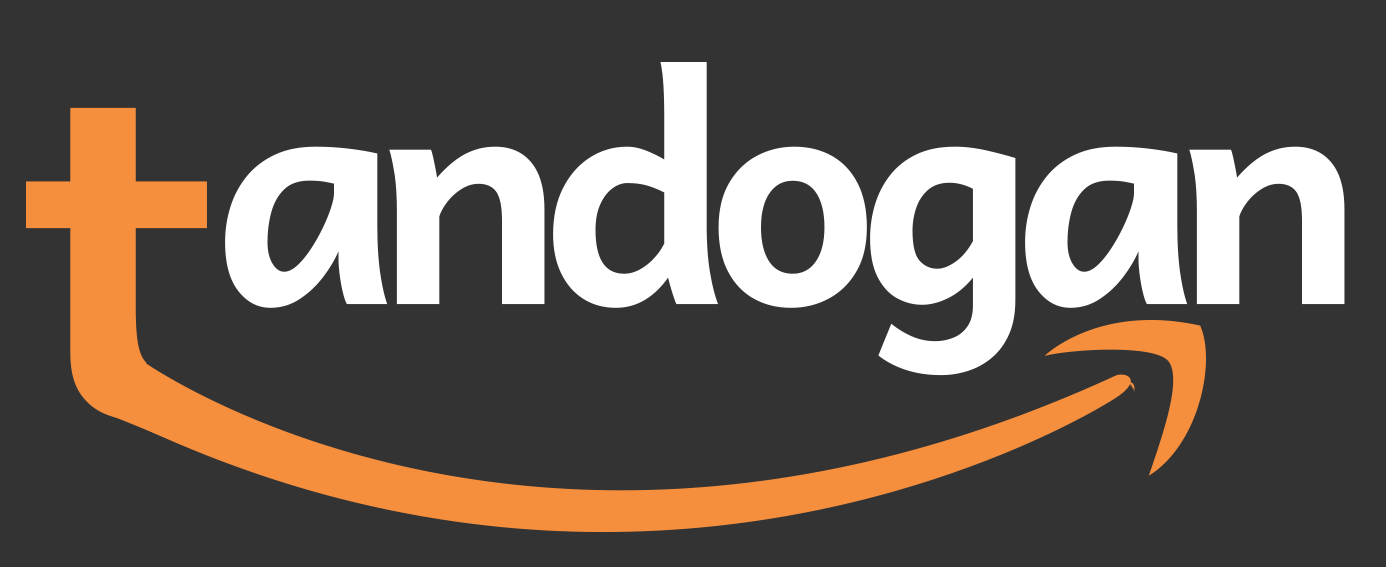
<style>
.page{position:relative;width:1386px;height:567px;background:#333333}
.page>*{position:absolute;margin:0}
.t1{font:309.7px "Andika-Bold";letter-spacing:-0.08em;color:#ffffff}
.t2{font:478px "Andika-Bold";letter-spacing:-0.08em;color:#f68f3d}
</style>
<div class="page">
<p class="t1" style="left:225px;top:62px;width:1120px;height:314px">andogan</p>
<p class="t2" style="left:26px;top:107px;width:185px;height:315px">t</p>
</div>
